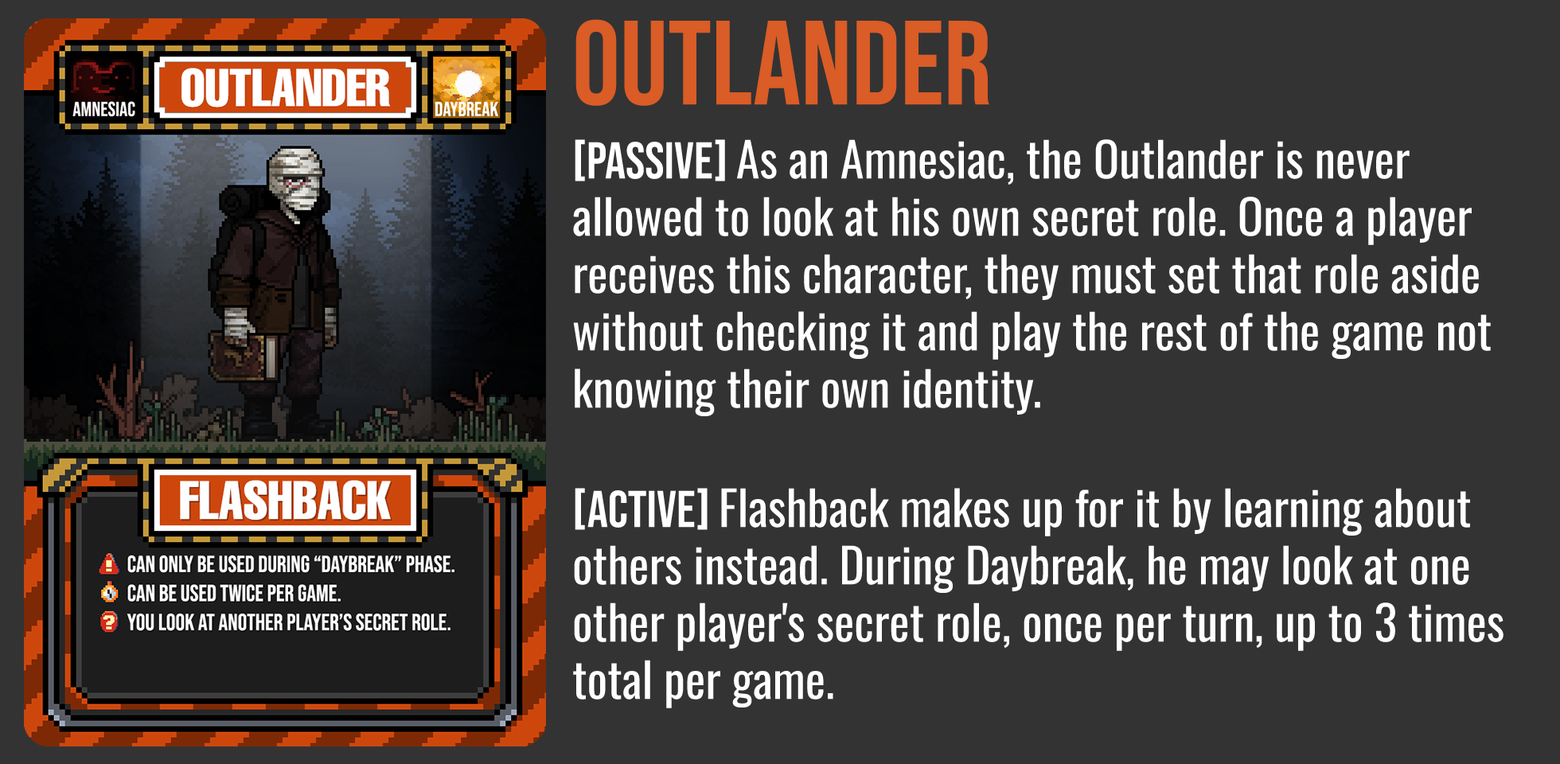
<style>
.page{position:relative;width:1560px;height:764px;background:#333333}
.page>*{position:absolute;margin:0}
.t1{font:119.4px "BebasNeue-Regular";color:#da5c26}
.t2{font:47.8px "Oswald-Regular";color:#ffffff}
.t3{font:51.7px "BebasNeue-Regular";color:#ffffff}
</style>
<div class="page">
<p class="t1" style="left:576px;top:19px;width:414px;height:87px">OUTLANDER</p>
<p class="t2" style="left:573px;top:139px;width:931px;height:570px"><span class="t3">[PASSIVE] </span>As an Amnesiac, the Outlander is never allowed to look at his own secret role. Once a player receives this character, they must set that role aside without checking it and play the rest of the game not knowing their own identity.<br><br><span class="t3">[ACTIVE] </span>Flashback makes up for it by learning about others instead. During Daybreak, he may look at one other player's secret role, once per turn, up to 3 times total per game.</p>
</div>
